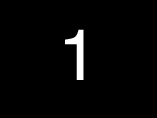
<style>
.page{position:relative;width:157px;height:118px;background:#000000}
.page>*{position:absolute;margin:0}
.t1{font:72px "Helvetica";color:#ffffff}
</style>
<div class="page">
<p class="t1" style="left:65px;top:29px;width:19px;height:51px">1</p>
</div>
